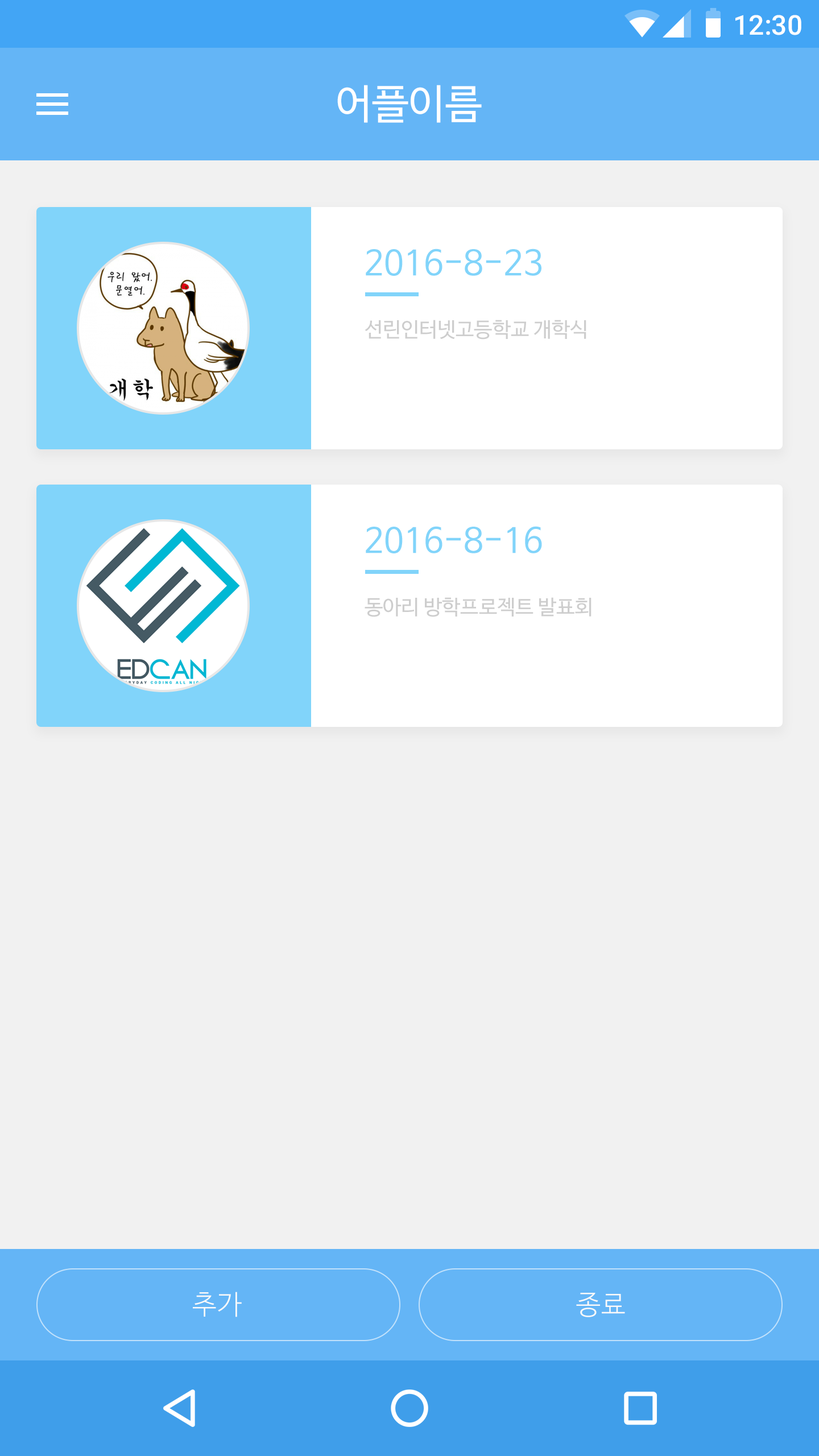
<style>
.page{position:relative;width:819px;height:1456px;background:#f1f1f1}
.page>*{position:absolute;margin:0}
.t1{font:27.3px "Roboto-Medium";color:#ffffff}
.t2{font:40.9px "NanumBarunGothic";color:#ffffff}
.t3{font:34.1px "NanumBarunGothic";color:#81d4fa}
.t4{font:20.5px "NanumBarunGothic";color:#cdcdcd}
.t5{font:27.3px "NanumBarunGothicLight";letter-spacing:0.025em;color:#fafafa}
</style>
<div class="page">
<p class="t1" style="left:735px;top:15px;width:66px;height:20px">12:30</p>
<p class="t2" style="left:337px;top:85px;width:145px;height:38px">어플이름</p>
<p class="t3" style="left:366px;top:249px;width:175px;height:27px">2016-8-23</p>
<p class="t4" style="left:365px;top:320px;width:221px;height:20px">선린인터넷고등학교 개학식</p>
<p class="t3" style="left:366px;top:526px;width:176px;height:27px">2016-8-16</p>
<p class="t4" style="left:365px;top:597px;width:226px;height:20px">동아리 방학프로젝트 발표회</p>
<p class="t5" style="left:193px;top:1292px;width:49px;height:25px">추가</p>
<p class="t5" style="left:576px;top:1293px;width:49px;height:24px">종료</p>
</div>
